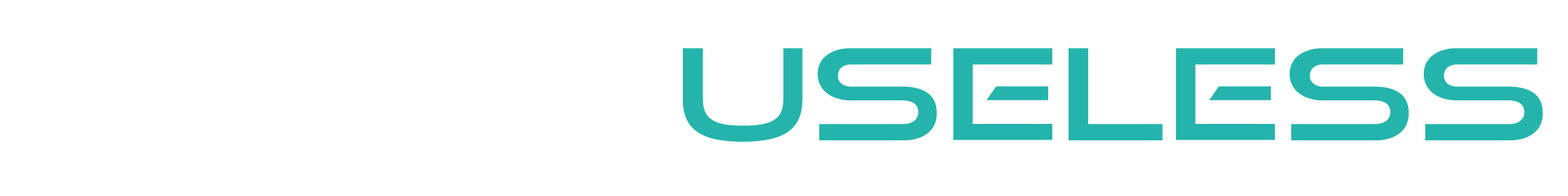
<style>
.page{position:relative;width:1568px;height:196px;background:#ffffff}
.page>*{position:absolute;margin:0}
.t1{font:126.7px "GoodTimesRg-Regular";color:#24b4ab;scale:1.2 1}
.t2{font:126.7px "GoodTimesRg-Regular";color:#ffffff;scale:1.2 1}
</style>
<div class="page">
<p class="t1" style="left:26px;top:48px;width:1517px;height:94px"><span class="t2">Surge</span>Useless</p>
</div>
